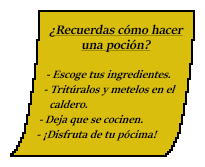
<style>
.page{position:relative;width:205px;height:167px;background:#d9be0e}
.page>*{position:absolute;margin:0}
.t1{font:14px/15px "SitkaBanner-Bold";color:#000000;font-style:italic;text-decoration:underline}
.t2{font:12.2px/15.3px "SitkaBanner-Bold";color:#000000;font-style:italic}
</style>
<div class="page">
<p class="t1" style="left:49px;top:24px;width:135px;height:29px;text-align:center">¿Recuerdas cómo hacer<br>una poción?</p>
<p class="t2" style="left:37px;top:69px;width:139px;height:72px">- Escoge tus ingredientes.<br>- Tritúralos y metelos en el <br>   caldero.<br>- Deja que se cocinen.<br>- ¡Disfruta de tu pócima!</p>
</div>
